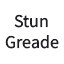
<style>
.page{position:relative;width:64px;height:64px;background:#ffffff}
.page>*{position:absolute;margin:0}
.t1{font:18px "SourceSansRoman-Regular";color:#202024}
</style>
<div class="page">
<p class="t1" style="left:5px;top:14px;width:54px;height:35px;text-align:center">Stun<br>Greade</p>
</div>
